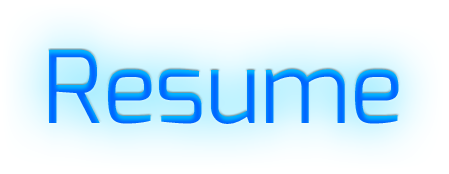
<style>
.page{position:relative;width:449px;height:174px}
.page>*{position:absolute;margin:0}
.t1{font:100px "Exo-Regular";color:#0078ff}
</style>
<div class="page">
<p class="t1" style="left:49px;top:49px;width:350px;height:75px">Resume</p>
</div>
